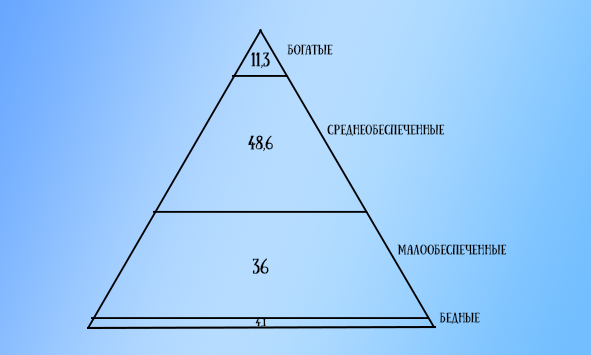
<style>
.page{position:relative;width:591px;height:355px}
.page>*{position:absolute;margin:0}
.t1{font:14px "Sunday-Regular";color:#000000;scale:1.16 1}
.t2{font:9.7px "Sunday-Regular";color:#000000;scale:1.16 1}
.t3{font:13.7px "Sunday-Regular";color:#000000;scale:1.16 1}
.t4{font:15.2px "Sunday-Regular";color:#000000;scale:1.16 1}
.t5{font:8.3px "Sunday-Regular";color:#000000;scale:1.31 1}
</style>
<div class="page">
<p class="t1" style="left:251px;top:52px;width:19px;height:16px">11,3</p>
<p class="t2" style="left:287px;top:44px;width:46px;height:11px">Богатые</p>
<p class="t2" style="left:327px;top:124px;width:118px;height:12px">среднеобеспеченные</p>
<p class="t3" style="left:248px;top:135px;width:25px;height:16px">48,6</p>
<p class="t2" style="left:397px;top:244px;width:110px;height:11px">малообеспеченные</p>
<p class="t4" style="left:252px;top:258px;width:17px;height:16px">36</p>
<p class="t5" style="left:255px;top:317px;width:11px;height:10px">4,1</p>
<p class="t2" style="left:439px;top:312px;width:41px;height:12px">бедные</p>
</div>
